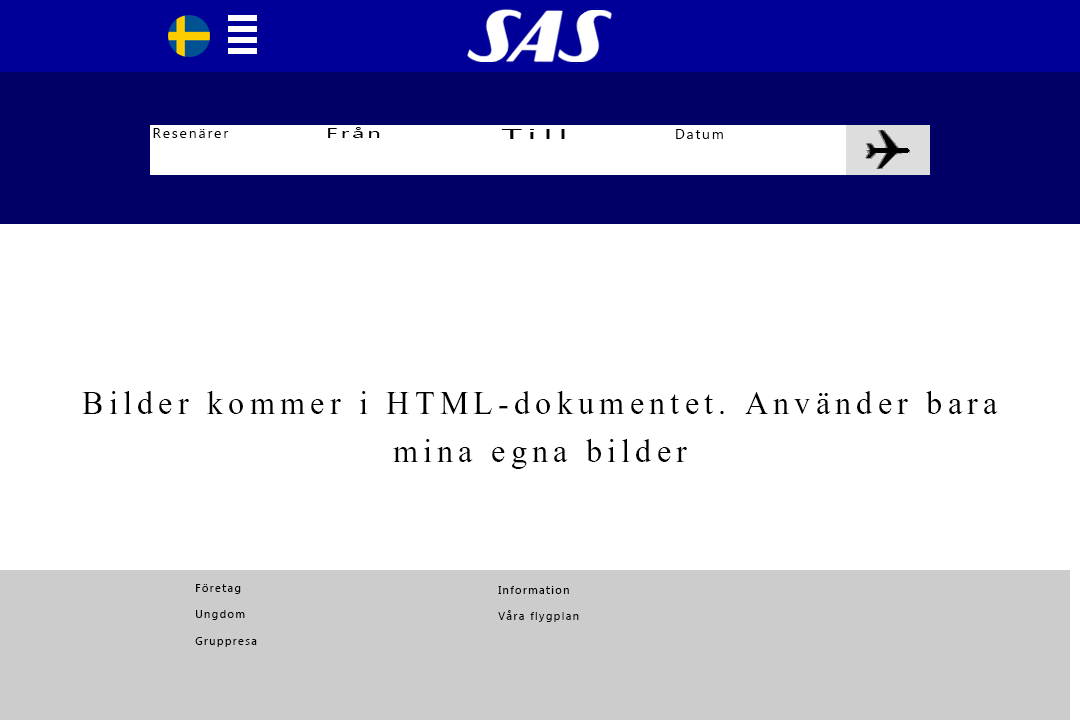
<style>
.page{position:relative;width:1080px;height:720px;background:#ffffff}
.page>*{position:absolute;margin:0}
.t1{font:14px "Gadugi";letter-spacing:0.13em;color:#000000}
.t2{font:14px "Gadugi";letter-spacing:0.13em;color:#000000;scale:1.7 1}
.t3{font:14px "Gadugi";letter-spacing:0.13em;color:#000000;scale:2.93 1}
.t4{font:40px "Aparajita";letter-spacing:0.13em;color:#000000}
.t5{font:11px "Gadugi";letter-spacing:0.13em;color:#000000}
</style>
<div class="page">
<p class="t1" style="left:153px;top:128px;width:76px;height:10px">Resenärer</p>
<p class="t2" style="left:328px;top:127px;width:52px;height:11px">Från</p>
<p class="t3" style="left:501px;top:129px;width:64px;height:10px">Till</p>
<p class="t1" style="left:676px;top:129px;width:47px;height:10px">Datum</p>
<p class="t4" style="left:82px;top:391px;width:916px;height:78px;text-align:center">Bilder kommer i HTML-dokumentet. Använder bara<br>mina egna bilder</p>
<p class="t5" style="left:195px;top:584px;width:62px;height:63px">Företag<br><br>Ungdom<br><br>Gruppresa</p>
<p class="t5" style="left:498px;top:586px;width:81px;height:36px">Information<br><br>Våra flygplan</p>
</div>
